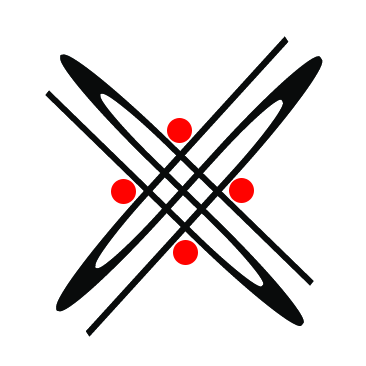
<style>
.page{position:relative;width:366px;height:366px;background:#ffffff}
.page>*{position:absolute;margin:0}
.t1{font:117.1px "TimeBurner";color:#090b0b;scale:9.42 1}
.t2{font:106.4px "TimeBurner";color:#090b0b;scale:10.02 1}
</style>
<div class="page">
<p class="t1" style="left:56px;top:36px;width:267px;height:301px;rotate:-48deg">s</p>
<p class="t2" style="left:45px;top:54px;width:269px;height:272px;rotate:44deg">s</p>
</div>
